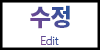
<style>
.page{position:relative;width:100px;height:50px;background:#ffffff}
.page>*{position:absolute;margin:0}
.t1{font:23.8px "NotoSansCJKkr-Black";letter-spacing:-0.04em}
.t2{font:11.1px "NotoSansCJKkr-Light";letter-spacing:-0.04em}
</style>
<div class="page">
<p class="t1" style="left:30px;top:5px;width:40px;height:24px">수정</p>
<p class="t2" style="left:41px;top:36px;width:18px;height:9px">Edit</p>
</div>
